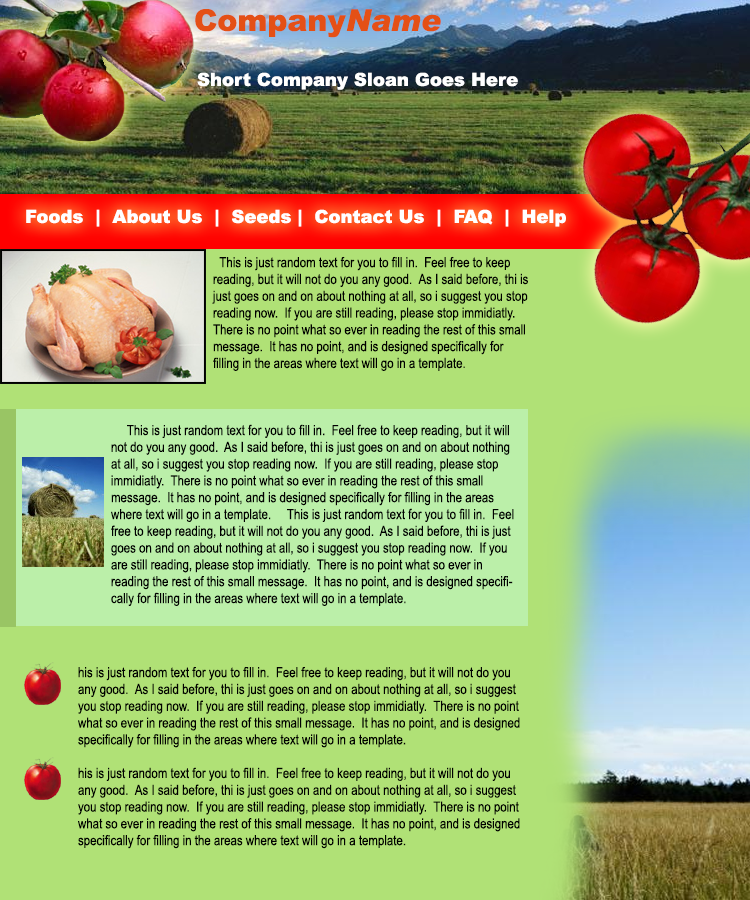
<style>
.page{position:relative;width:750px;height:900px;background:#b0e176}
.page>*{position:absolute;margin:0}
.t1{font:30px "Arial-Black";color:#e45016}
.t2{font:30px "Arial-BlackItalic";color:#e45016}
.t3{font:18px "Arial-Black";color:#ffffff}
.t4{font:14px "ArialNarrow";color:#000000}
</style>
<div class="page">
<p class="t1" style="left:195px;top:9px;width:246px;height:29px">Company<span class="t2">Name</span></p>
<p class="t3" style="left:197px;top:72px;width:321px;height:18px">Short Company Sloan Goes Here</p>
<p class="t3" style="left:26px;top:209px;width:540px;height:18px">Foods  |  About Us  |  Seeds |  Contact Us  |  FAQ  |  Help</p>
<p class="t4" style="left:212px;top:256px;width:316px;height:115px">This is just random text for you to fill in.  Feel free to keep reading, but it will not do you any good.  As I said before, thi is just goes on and on about nothing at all, so i suggest you stop reading now.  If you are still reading, please stop immidiatly.  There is no point what so ever in reading the rest of this small message.  It has no point, and is designed specifically for filling in the areas where text will go in a template.</p>
<p class="t4" style="left:111px;top:424px;width:403px;height:182px">This is just random text for you to fill in.  Feel free to keep reading, but it will not do you any good.  As I said before, thi is just goes on and on about nothing at all, so i suggest you stop reading now.  If you are still reading, please stop immidiatly.  There is no point what so ever in reading the rest of this small message.  It has no point, and is designed specifically for filling in the areas where text will go in a template.     This is just random text for you to fill in.  Feel free to keep reading, but it will not do you any good.  As I said before, thi is just goes on and on about nothing at all, so i suggest you stop reading now.  If you are still reading, please stop immidiatly.  There is no point what so ever in reading the rest of this small message.  It has no point, and is designed specifically for filling in the areas where text will go in a template.</p>
<p class="t4" style="left:78px;top:666px;width:442px;height:183px">his is just random text for you to fill in.  Feel free to keep reading, but it will not do you any good.  As I said before, thi is just goes on and on about nothing at all, so i suggest you stop reading now.  If you are still reading, please stop immidiatly.  There is no point what so ever in reading the rest of this small message.  It has no point, and is designed specifically for filling in the areas where text will go in a template.<br><br>his is just random text for you to fill in.  Feel free to keep reading, but it will not do you any good.  As I said before, thi is just goes on and on about nothing at all, so i suggest you stop reading now.  If you are still reading, please stop immidiatly.  There is no point what so ever in reading the rest of this small message.  It has no point, and is designed specifically for filling in the areas where text will go in a template.</p>
</div>
